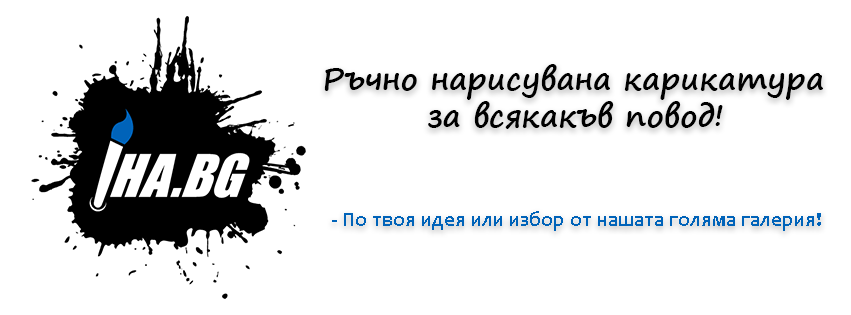
<style>
.page{position:relative;width:851px;height:315px;background:#ffffff}
.page>*{position:absolute;margin:0}
.t1{font:31.2px "SegoePrint-Bold";color:#000000}
.t2{font:31.2px "MonotypeCorsiva";color:#000000}
.t3{font:20.8px "Candara-Bold";color:#0063b9}
</style>
<div class="page">
<p class="t1" style="left:324px;top:64px;width:499px;height:65px;text-align:center"><span class="t2"> </span>Ръчно нарисувана карикатура <br>за всякакъв повод!</p>
<p class="t3" style="left:332px;top:211px;width:489px;height:20px">- По твоя идея или избор от нашата голяма галерия!</p>
</div>
